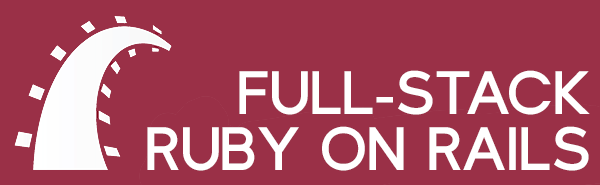
<style>
.page{position:relative;width:600px;height:185px;background:#9a3047}
.page>*{position:absolute;margin:0}
.t1{font:83.3px "LarkeSansBold-Regular";color:#ffffff}
</style>
<div class="page">
<p class="t1" style="left:239px;top:70px;width:351px;height:45px">FULL-STACK</p>
<p class="t1" style="left:147px;top:126px;width:442px;height:45px">RUBY ON RAILS</p>
</div>
